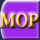
<style>
.page{position:relative;width:40px;height:40px;background:#a027ef}
.page>*{position:absolute;margin:0}
.t1{font:18px "MyungjoXB-HM"}
</style>
<div class="page">
<p class="t1" style="left:0px;top:13px;width:39px;height:14px">MOP</p>
</div>
